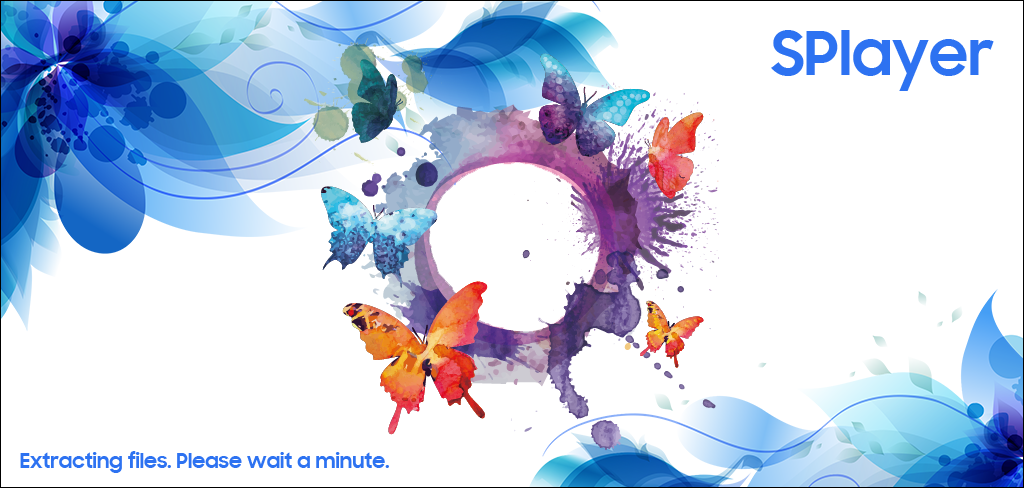
<style>
.page{position:relative;width:1024px;height:488px;background:#ffffff}
.page>*{position:absolute;margin:0}
.t1{font:60px "SamsungSharpSans-Bold";color:#2d72f1}
.t2{font:20px "SamsungSharpSans-Bold";color:#2d72f1}
</style>
<div class="page">
<p class="t1" style="left:771px;top:30px;width:223px;height:61px">SPlayer</p>
<p class="t2" style="left:20px;top:451px;width:369px;height:22px">Extracting files. Please wait a minute.</p>
</div>
